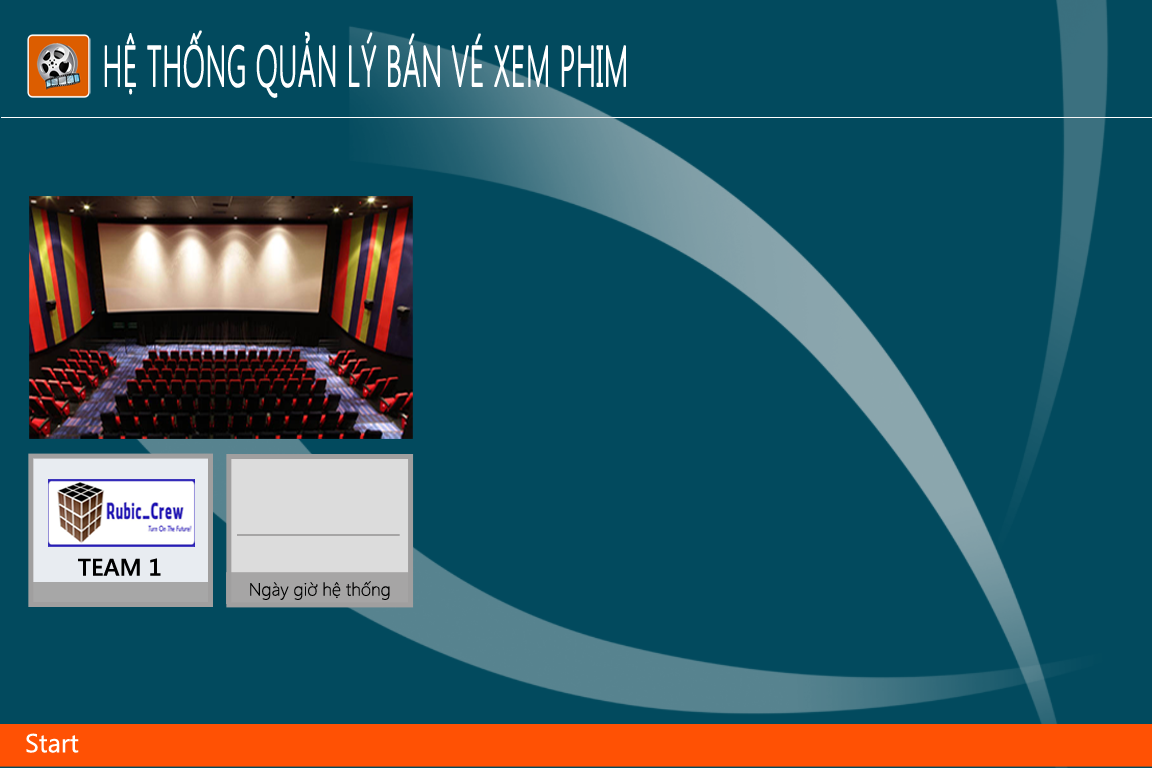
<style>
.page{position:relative;width:1152px;height:768px;background:#024a5e}
.page>*{position:absolute;margin:0}
.t1{font:57.1px "SegoeUI-Light";color:#ffffff;text-transform:uppercase;font-weight:bold;scale:0.51 1}
.t2{font:24px "SegoeUI-SemiBold";color:#000000;text-transform:uppercase}
.t3{font:18px "SegoeUI-Light";color:#000000}
.t4{font:26px "SegoeUI";color:#ffffff}
</style>
<div class="page">
<p class="t1" style="left:104px;top:30px;width:522px;height:68px">HỆ THỐNG QUẢN LÝ BÁN VÉ XEM PHIM</p>
<p class="t2" style="left:78px;top:558px;width:83px;height:18px">TEAM 1</p>
<p class="t3" style="left:250px;top:581px;width:140px;height:19px">Ngày giờ hệ thống</p>
<p class="t4" style="left:26px;top:733px;width:53px;height:20px">Start</p>
</div>
